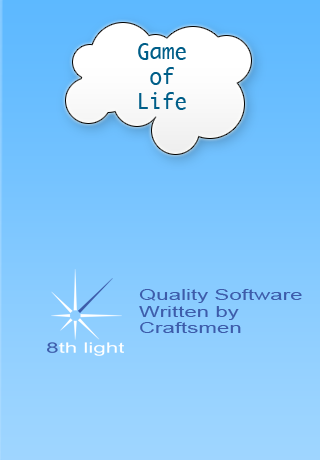
<style>
.page{position:relative;width:320px;height:460px}
.page>*{position:absolute;margin:0}
.t1{font:20.8px "Ayuthaya";color:#005e88}
.t2{font:14.6px/16.7px "ArialMT";color:#3d5caa;scale:1.53 1}
</style>
<div class="page">
<p class="t1" style="left:138px;top:43px;width:48px;height:67px;text-align:center">Game<br>of<br>Life</p>
<p class="t2" style="left:139px;top:289px;width:163px;height:44px">Quality Software<br>Written by<br>Craftsmen</p>
</div>
